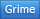
<style>
.page{position:relative;width:40px;height:19px}
.page>*{position:absolute;margin:0}
.t1{font:11px "Tahoma";letter-spacing:0.03em;color:#ffffff}
</style>
<div class="page">
<p class="t1" style="left:5px;top:5px;width:30px;height:8px">Grime</p>
</div>
